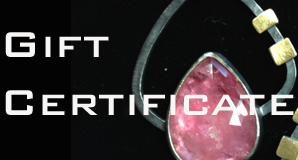
<style>
.page{position:relative;width:298px;height:160px}
.page>*{position:absolute;margin:0}
.t1{font:48px "BankGothicBT-Medium";color:#f8f5f5}
</style>
<div class="page">
<p class="t1" style="left:5px;top:32px;width:289px;height:83px">Gift <br>Certificate</p>
</div>
